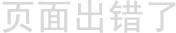
<style>
.page{position:relative;width:176px;height:33px;background:#ffffff}
.page>*{position:absolute;margin:0}
.t1{font:36px "SimHei";color:#d8d8d8}
</style>
<div class="page">
<p class="t1" style="left:2px;top:0px;width:174px;height:33px">页面出错了</p>
</div>
